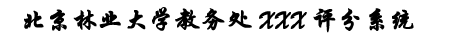
<style>
.page{position:relative;width:470px;height:41px;background:#ffffff}
.page>*{position:absolute;margin:0}
.t1{font:25px "STXingkai";color:#000000;font-weight:bold}
</style>
<div class="page">
<p class="t1" style="left:24px;top:7px;width:390px;height:26px">北京林业大学教务处 XXX 评分系统</p>
</div>
